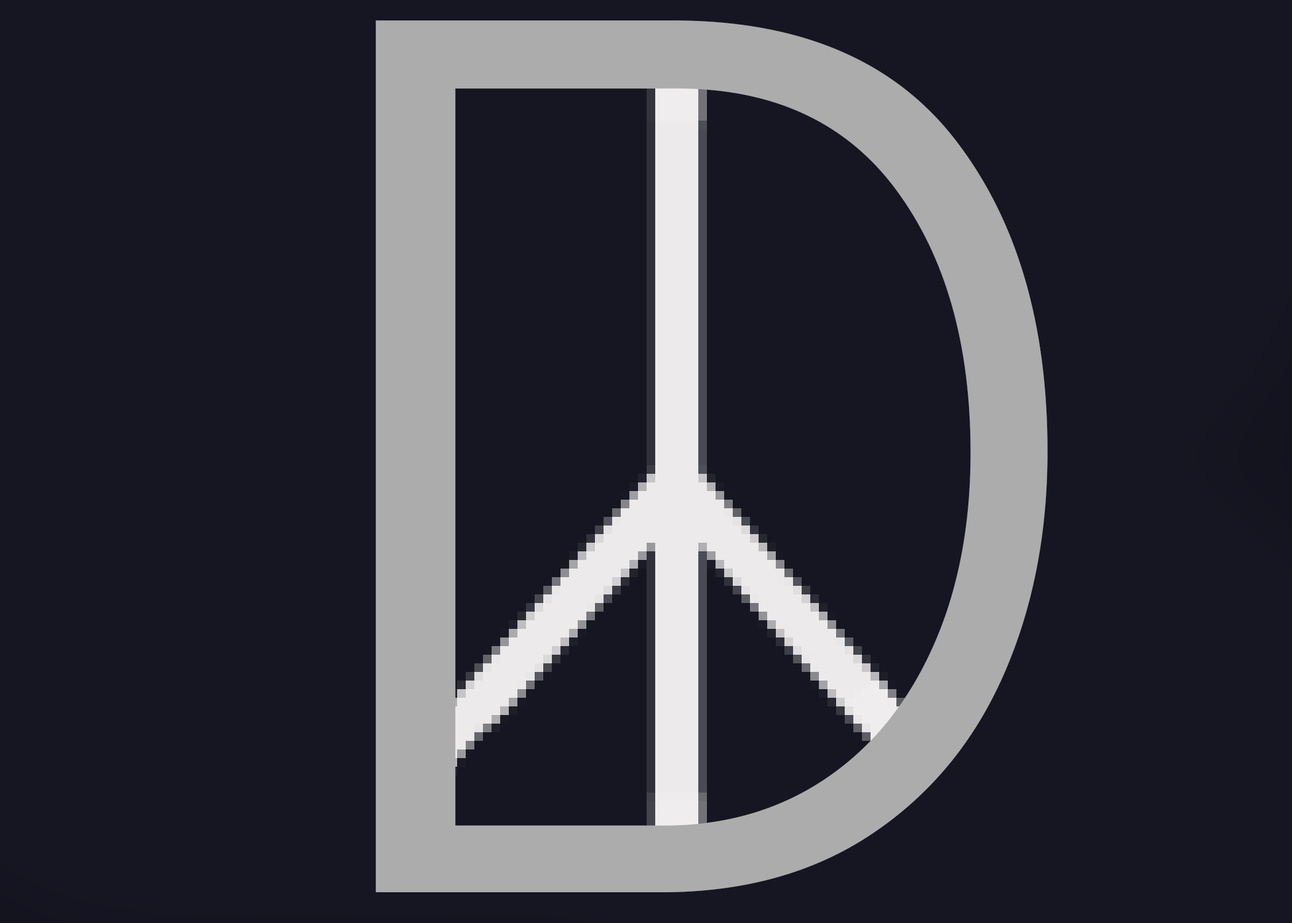
<style>
.page{position:relative;width:1292px;height:923px;background:#151621}
.page>*{position:absolute;margin:0}
.t1{font:1281.8px "Catamaran-Light";color:#acacac}
</style>
<div class="page">
<p class="t1" style="left:375px;top:20px;width:673px;height:872px">D</p>
</div>
